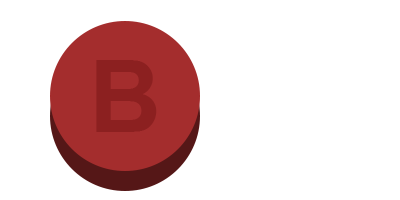
<style>
.page{position:relative;width:400px;height:200px;background:#ffffff}
.page>*{position:absolute;margin:0}
.t1{font:100px "Arial-BoldMT";color:#8c2020}
</style>
<div class="page">
<p class="t1" style="left:96px;top:60px;width:61px;height:72px">B</p>
</div>
